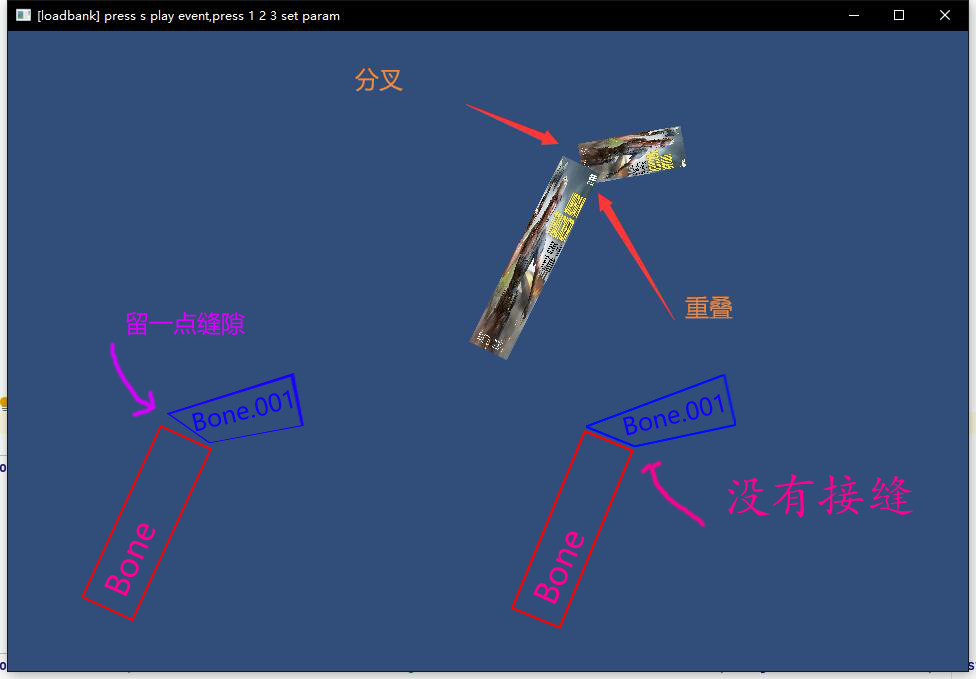
<style>
.page{position:relative;width:976px;height:679px;background:#314e7a}
.page>*{position:absolute;margin:0}
.t1{font:24px "MicrosoftYaHei";color:#d800ff}
.t2{font:24px "MicrosoftYaHei";color:#1200ff}
.t3{font:48px "STKaiti";color:#ff0090}
.t4{font:32px "MicrosoftYaHei";color:#ff0090}
</style>
<div class="page">
<p class="t1" style="left:126px;top:312px;width:119px;height:24px">留一点缝隙</p>
<p class="t2" style="left:192px;top:390px;width:101px;height:42px;rotate:-14deg">Bone.001</p>
<p class="t2" style="left:623px;top:394px;width:101px;height:42px;rotate:-14deg">Bone.001</p>
<p class="t3" style="left:728px;top:474px;width:185px;height:44px">没有接缝</p>
<p class="t4" style="left:104px;top:523px;width:51px;height:73px;rotate:-66deg">Bone</p>
<p class="t4" style="left:533px;top:531px;width:51px;height:73px;rotate:-66deg">Bone</p>
</div>
